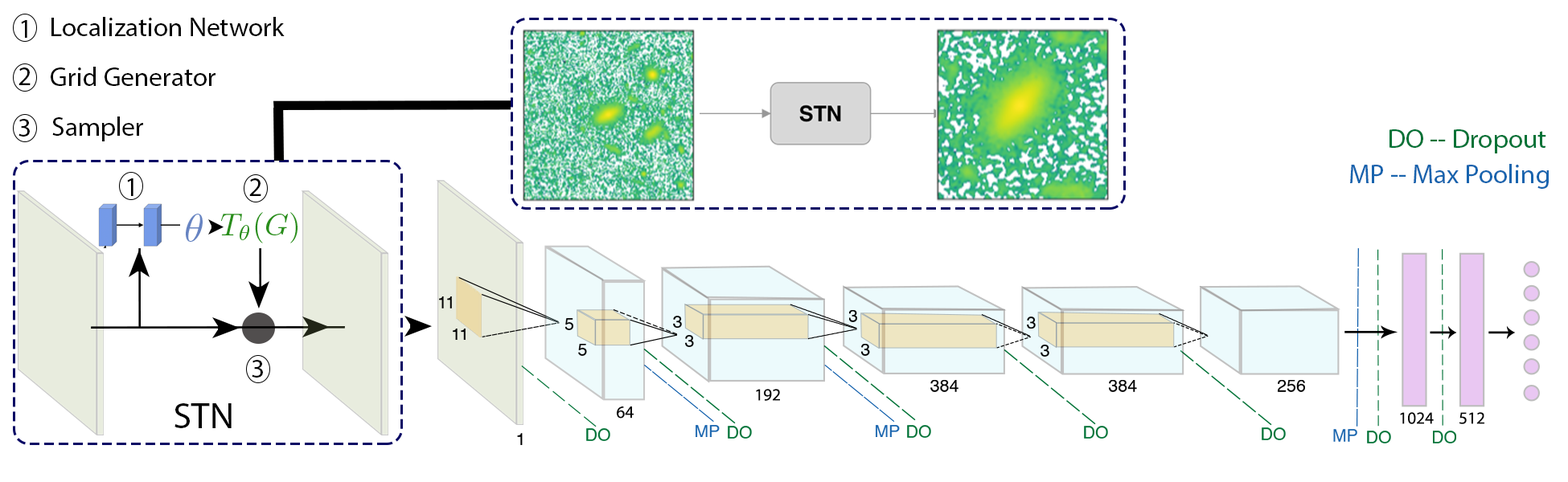
<style>
.page{position:relative;width:1568px;height:482px;background:#ffffff}
.page>*{position:absolute;margin:0}
.t1{font:26.8px "MyriadPro-Regular";color:#000000}
.t2{font:26.8px "MyriadPro-Regular";color:#007236}
.t3{font:26.8px "MyriadPro-Regular";color:#1864ae}
.t4{font:17.1px "Helvetica";color:#000000}
.t5{font:17.1px "MyriadPro-Regular";color:#000000}
.t6{font:36.9px "MyriadPro-Regular";color:#000000}
.t7{font:17.1px "Helvetica";color:#1864ae}
.t8{font:17.1px "Helvetica";color:#007236}
</style>
<div class="page">
<p class="t1" style="left:51px;top:17px;width:234px;height:19px">Localization Network</p>
<p class="t1" style="left:21px;top:20px;width:6px;height:18px">1</p>
<p class="t1" style="left:18px;top:68px;width:13px;height:17px">2</p>
<p class="t1" style="left:51px;top:67px;width:164px;height:19px">Grid Generator</p>
<p class="t1" style="left:18px;top:119px;width:12px;height:18px">3</p>
<p class="t1" style="left:52px;top:117px;width:91px;height:25px">Sampler</p>
<p class="t2" style="left:1389px;top:129px;width:157px;height:25px">DO -- Dropout</p>
<p class="t3" style="left:1350px;top:164px;width:199px;height:25px">MP -- Max Pooling</p>
<p class="t1" style="left:127px;top:179px;width:6px;height:17px">1</p>
<p class="t1" style="left:249px;top:179px;width:12px;height:17px">2</p>
<p class="t4" style="left:439px;top:297px;width:13px;height:12px">11</p>
<p class="t4" style="left:673px;top:316px;width:9px;height:12px">3</p>
<p class="t4" style="left:849px;top:310px;width:8px;height:12px">3</p>
<p class="t4" style="left:1027px;top:317px;width:9px;height:12px">3</p>
<p class="t4" style="left:453px;top:329px;width:13px;height:11px">11</p>
<p class="t4" style="left:565px;top:318px;width:8px;height:12px">5</p>
<p class="t4" style="left:685px;top:335px;width:9px;height:12px">3</p>
<p class="t4" style="left:578px;top:344px;width:9px;height:12px">5</p>
<p class="t4" style="left:861px;top:344px;width:9px;height:12px">3</p>
<p class="t4" style="left:1041px;top:345px;width:8px;height:12px">3</p>
<p class="t1" style="left:252px;top:360px;width:11px;height:18px">3</p>
<p class="t5" style="left:756px;top:389px;width:24px;height:12px">192</p>
<p class="t4" style="left:930px;top:380px;width:28px;height:12px">384</p>
<p class="t4" style="left:1109px;top:380px;width:28px;height:12px">384</p>
<p class="t4" style="left:1278px;top:380px;width:27px;height:12px">256</p>
<p class="t6" style="left:174px;top:404px;width:58px;height:25px">STN</p>
<p class="t5" style="left:617px;top:407px;width:17px;height:12px">64</p>
<p class="t5" style="left:1400px;top:413px;width:34px;height:12px">1024</p>
<p class="t5" style="left:1459px;top:413px;width:25px;height:12px">512</p>
<p class="t7" style="left:696px;top:425px;width:24px;height:12px">MP</p>
<p class="t7" style="left:876px;top:425px;width:24px;height:12px">MP</p>
<p class="t8" style="left:907px;top:425px;width:24px;height:13px">DO</p>
<p class="t4" style="left:517px;top:433px;width:6px;height:12px">1</p>
<p class="t8" style="left:586px;top:429px;width:24px;height:12px">DO</p>
<p class="t8" style="left:728px;top:426px;width:24px;height:13px">DO</p>
<p class="t8" style="left:1084px;top:426px;width:24px;height:13px">DO</p>
<p class="t8" style="left:1262px;top:428px;width:24px;height:13px">DO</p>
<p class="t7" style="left:1333px;top:429px;width:24px;height:13px">MP</p>
<p class="t8" style="left:1367px;top:431px;width:24px;height:13px">DO</p>
<p class="t8" style="left:1433px;top:431px;width:23px;height:13px">DO</p>
</div>
